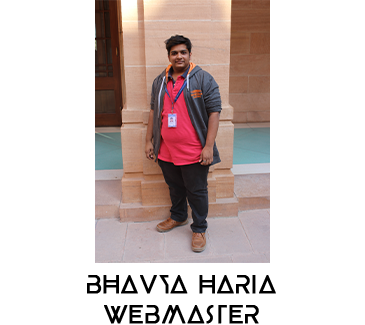
<style>
.page{position:relative;width:365px;height:325px;background:#ffffff}
.page>*{position:absolute;margin:0}
.t1{font:25px "BEYNO";color:#000000;font-weight:bold}
</style>
<div class="page">
<p class="t1" style="left:87px;top:275px;width:189px;height:49px;text-align:center">Bhavya haria<br>webmaster</p>
</div>
